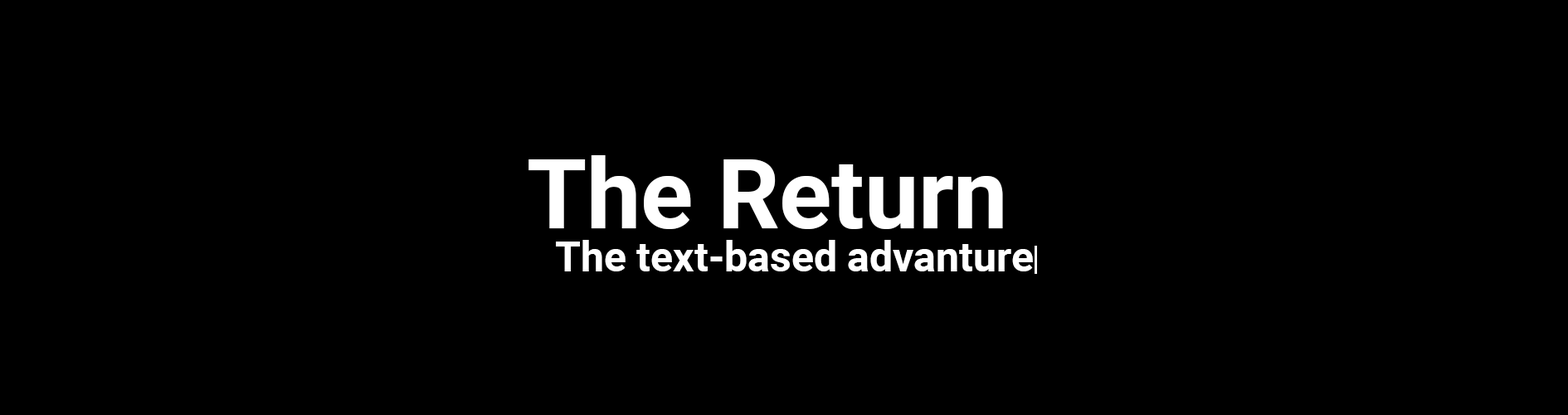
<style>
.page{position:relative;width:1568px;height:415px;background:#000000}
.page>*{position:absolute;margin:0}
.t1{font:96.8px "Roboto-Bold";color:#ffffff}
.t2{font:41.5px "Roboto-Bold";color:#ffffff}
</style>
<div class="page">
<p class="t1" style="left:528px;top:155px;width:475px;height:74px">The Return</p>
<p class="t2" style="left:556px;top:240px;width:477px;height:31px">The text-based advanture</p>
</div>
